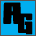
<style>
.page{position:relative;width:36px;height:36px;background:#000000}
.page>*{position:absolute;margin:0}
.t1{font:36.5px "Morning-Wasabi-Regular";color:#000000;scale:1.27 1}
.t2{font:33px "Morning-Wasabi-Regular";color:#000000;scale:1.11 1}
</style>
<div class="page">
<p class="t1" style="left:3px;top:2px;width:19px;height:22px">A</p>
<p class="t2" style="left:18px;top:13px;width:15px;height:22px">G</p>
</div>
